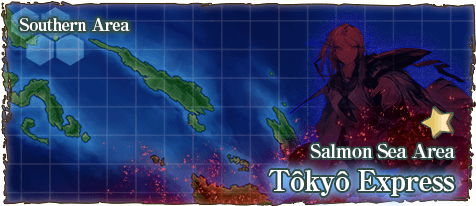
<style>
.page{position:relative;width:476px;height:206px}
.page>*{position:absolute;margin:0}
.t1{font:17px "RyuminPro-ExBold";letter-spacing:-0.04em;color:#ffffff}
.t2{font:19px "RyuminPro-ExBold";letter-spacing:-0.04em;color:#ffffff}
.t3{font:28px "RyuminPro-ExBold";letter-spacing:-0.04em;color:#ffffff}
</style>
<div class="page">
<p class="t1" style="left:19px;top:18px;width:111px;height:13px">Southern Area</p>
<p class="t2" style="left:310px;top:143px;width:145px;height:15px">Salmon Sea Area</p>
<p class="t3" style="left:268px;top:170px;width:186px;height:26px">Tôkyô Express</p>
</div>
